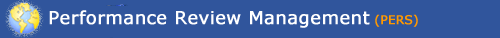
<style>
.page{position:relative;width:500px;height:38px;background:#30559c}
.page>*{position:absolute;margin:0}
.t1{font:18px "Verdana";color:#ffffff;font-weight:bold}
.t2{font:12px "Verdana";color:#ff9900;font-weight:bold}
</style>
<div class="page">
<p class="t1" style="left:49px;top:10px;width:369px;height:18px">Performance Review Management <span class="t2">(PERS)</span></p>
</div>
